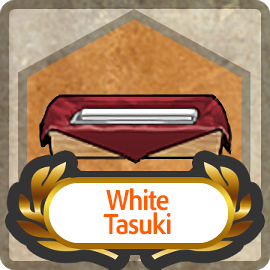
<style>
.page{position:relative;width:270px;height:270px}
.page>*{position:absolute;margin:0}
.t1{font:30px/24px "AdobeClean-Bold";letter-spacing:-0.04em;color:#ff5d00;scale:0.9 1}
</style>
<div class="page">
<p class="t1" style="left:103px;top:188px;width:68px;height:47px;text-align:center">White<br>Tasuki</p>
</div>
